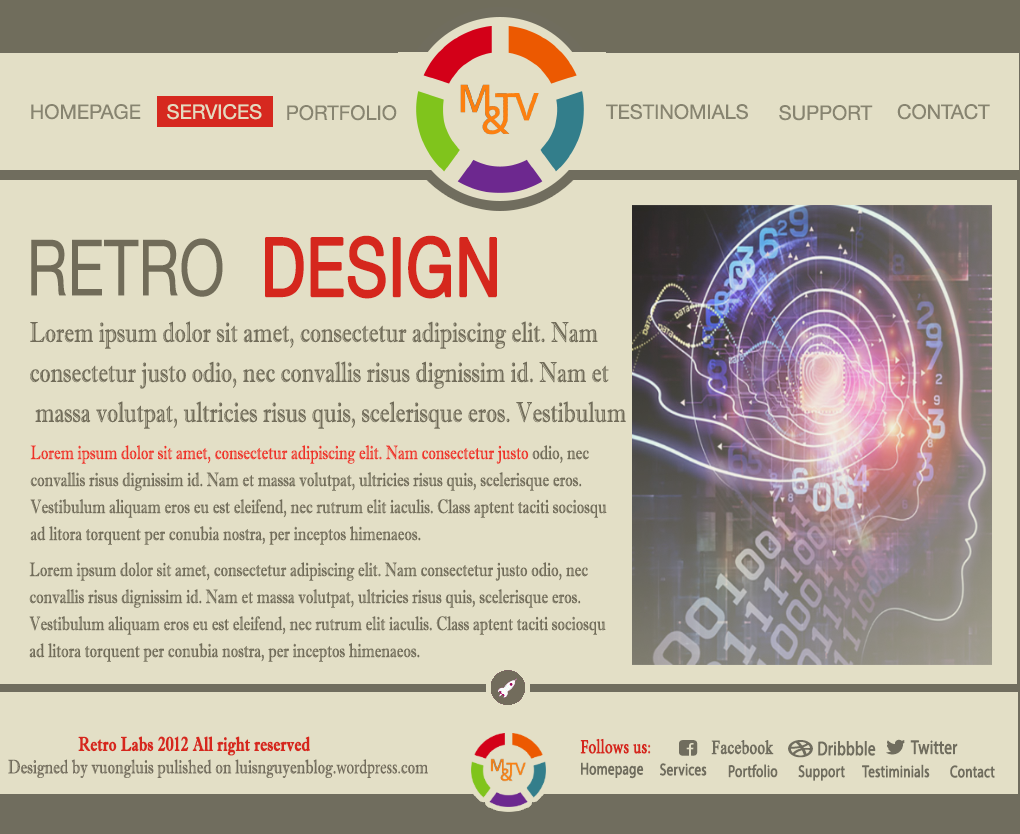
<style>
.page{position:relative;width:1020px;height:834px;background:#e3dfc6}
.page>*{position:absolute;margin:0}
.t1{font:20px "HelveticaNeue";color:#878470}
.t2{font:20px "HelveticaNeue";color:#e4dbc0}
.t3{font:77.7px "HelveticaNeue";color:#716c59;scale:0.77 1}
.t4{font:81.1px "HelveticaNeue";color:#d5271d;font-weight:bold;scale:0.77 1}
.t5{font:28.6px/40px "ImprintMT-Shadow";color:#716c59;scale:0.77 1}
.t6{font:19.5px/27px "ImprintMT-Shadow";color:#716c59;scale:0.77 1}
.t7{font:19.5px/27px "ImprintMT-Shadow";color:#ee3127;scale:0.77 1}
.t8{font:19.5px "ImprintMT-Shadow";color:#d6271d;font-weight:bold;scale:0.77 1}
.t9{font:19.5px "MinionPro-Regular";color:#d5271d;font-weight:bold;scale:0.77 1}
.t10{font:19.5px "TimesNewRomanPSMT";color:#706d5e;font-weight:bold;scale:0.77 1}
.t11{font:19.5px "MyriadPro-Regular";color:#706d5e;font-weight:bold;scale:0.77 1}
.t12{font:19.5px "ImprintMT-Shadow";color:#726c5c;scale:0.77 1}
.t13{font:19.5px "MinionPro-Regular";color:#726c5c;scale:0.77 1}
.t14{font:16.9px "MyriadPro-Regular";color:#706d5e;font-weight:bold;scale:0.77 1}
</style>
<div class="page">
<p class="t1" style="left:31px;top:104px;width:110px;height:16px">HOMEPAGE</p>
<p class="t2" style="left:167px;top:104px;width:95px;height:16px">SERVICES</p>
<p class="t1" style="left:287px;top:105px;width:110px;height:16px">PORTFOLIO</p>
<p class="t1" style="left:606px;top:104px;width:142px;height:16px">TESTINOMIALS</p>
<p class="t1" style="left:779px;top:105px;width:94px;height:16px">SUPPORT</p>
<p class="t1" style="left:897px;top:104px;width:93px;height:16px">CONTACT</p>
<p class="t3" style="left:31px;top:238px;width:192px;height:59px">RETRO</p>
<p class="t4" style="left:265px;top:235px;width:232px;height:64px">DESIGN</p>
<p class="t5" style="left:30px;top:321px;width:596px;height:108px;text-align:right">Lorem ipsum dolor sit amet, consectetur adipiscing elit. Nam <br>consectetur justo odio, nec convallis risus dignissim id. Nam et<br> massa volutpat, ultricies risus quis, scelerisque eros. Vestibulum</p>
<p class="t6" style="left:30px;top:445px;width:577px;height:100px;text-align:right"><span class="t7">Lorem ipsum dolor sit amet, consectetur adipiscing elit. Nam consectetur justo</span> odio, nec <br>convallis risus dignissim id. Nam et massa volutpat, ultricies risus quis, scelerisque eros. <br>Vestibulum aliquam eros eu est eleifend, nec rutrum elit iaculis. Class aptent taciti sociosqu <br>ad litora torquent per conubia nostra, per inceptos himenaeos.</p>
<p class="t6" style="left:29px;top:562px;width:577px;height:100px;text-align:right">Lorem ipsum dolor sit amet, consectetur adipiscing elit. Nam consectetur justo odio, nec <br>convallis risus dignissim id. Nam et massa volutpat, ultricies risus quis, scelerisque eros. <br>Vestibulum aliquam eros eu est eleifend, nec rutrum elit iaculis. Class aptent taciti sociosqu <br>ad litora torquent per conubia nostra, per inceptos himenaeos.</p>
<p class="t8" style="left:78px;top:736px;width:232px;height:20px">Retro Labs 2012 All right reserved</p>
<p class="t9" style="left:580px;top:738px;width:71px;height:16px">Follows us:</p>
<p class="t10" style="left:711px;top:740px;width:63px;height:15px">Facebook</p>
<p class="t11" style="left:818px;top:741px;width:58px;height:15px">Dribbble</p>
<p class="t11" style="left:910px;top:740px;width:48px;height:15px">Twitter</p>
<p class="t12" style="left:8px;top:759px;width:420px;height:19px">Designed by vuongluis pulished on luisnguyenblog.<span class="t13">wordpress.</span>com</p>
<p class="t14" style="left:581px;top:762px;width:63px;height:17px">Homepage</p>
<p class="t14" style="left:660px;top:763px;width:47px;height:13px">Services</p>
<p class="t14" style="left:728px;top:764px;width:50px;height:14px">Portfolio</p>
<p class="t14" style="left:798px;top:765px;width:47px;height:16px">Support</p>
<p class="t14" style="left:862px;top:764px;width:68px;height:14px">Testiminials</p>
<p class="t14" style="left:950px;top:765px;width:45px;height:13px">Contact</p>
</div>
